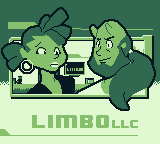
<style>
.page{position:relative;width:160px;height:144px;background:#306850}
.page>*{position:absolute;margin:0}
.t1{font:16px "8BITWONDERNominal";color:#86c06c;text-transform:uppercase}
.t2{font:9px "8BITWONDERNominal";color:#86c06c;text-transform:uppercase}
</style>
<div class="page">
<p class="t1" style="left:32px;top:115px;width:106px;height:13px">limbo<span class="t2">llc</span></p>
</div>
